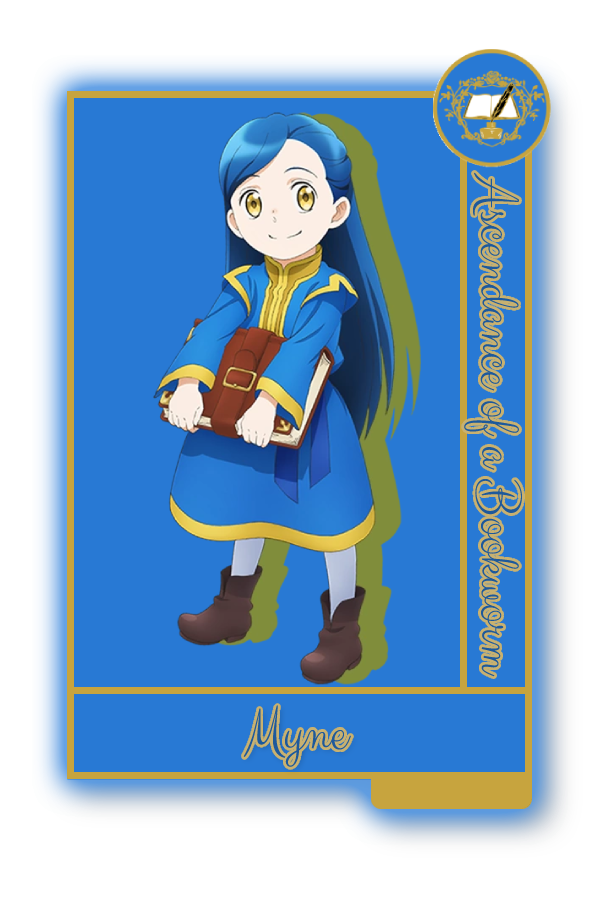
<style>
.page{position:relative;width:600px;height:900px;background:#2879d4}
.page>*{position:absolute;margin:0}
.t1{font:58px "ClickerScript-Regular";color:#1d599c}
.t2{font:60px "ClickerScript-Regular";color:#1d599c}
</style>
<div class="page">
<p class="t1" style="left:464px;top:172px;width:59px;height:505px;rotate:90deg">Ascendance of a Bookworm</p>
<p class="t2" style="left:243px;top:705px;width:109px;height:62px">Myne</p>
</div>
